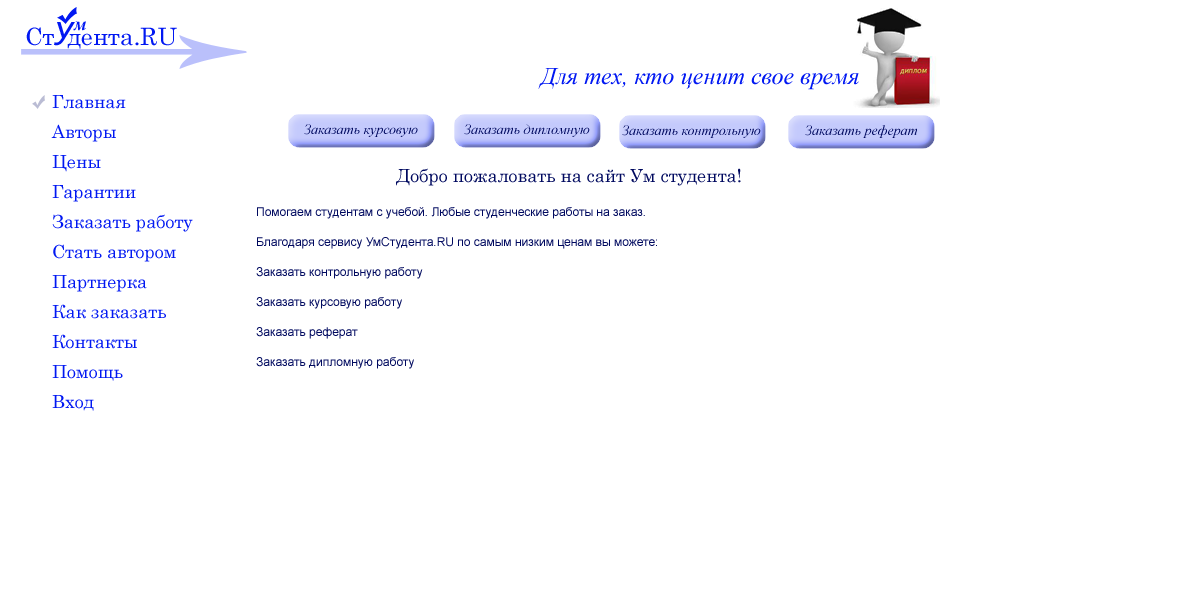
<style>
.page{position:relative;width:1200px;height:600px;background:#ffffff}
.page>*{position:absolute;margin:0}
.t1{font:24px "Century";color:#0118f2}
.t2{font:36px "Consolas-Italic";color:#0118f2}
.t3{font:18px "BookAntiqua-BoldItalic";color:#0118f2}
.t4{font:24px "TimesNewRomanPS-ItalicMT";color:#0118f2}
.t5{font:18px/30px "Century";color:#0118f2}
.t6{font:14px "TimesNewRomanPS-ItalicMT";color:#00095f}
.t7{font:18px "Century";color:#00095f}
.t8{font:12px/30px "ArialMT";color:#00095f}
</style>
<div class="page">
<p class="t1" style="left:26px;top:27px;width:151px;height:22px">Ст  дента.RU</p>
<p class="t2" style="left:54px;top:22px;width:21px;height:24px">У</p>
<p class="t3" style="left:73px;top:21px;width:13px;height:10px">м</p>
<p class="t4" style="left:538px;top:68px;width:321px;height:22px">Для тех, кто ценит свое время</p>
<p class="t5" style="left:51px;top:95px;width:142px;height:316px">Главная<br>Авторы<br>Цены<br>Гарантии<br>Заказать работу<br>Стать автором<br>Партнерка<br>Как заказать<br>Контакты<br>Помощь<br>Вход</p>
<p class="t6" style="left:304px;top:124px;width:114px;height:13px">Заказать курсовую</p>
<p class="t6" style="left:464px;top:124px;width:126px;height:13px">Заказать дипломную</p>
<p class="t6" style="left:622px;top:125px;width:139px;height:13px">Заказать контрольную</p>
<p class="t6" style="left:805px;top:125px;width:112px;height:13px">Заказать реферат</p>
<p class="t7" style="left:396px;top:168px;width:345px;height:18px">Добро пожаловать на сайт Ум студента!</p>
<p class="t8" style="left:256px;top:207px;width:401px;height:162px">Помогаем студентам с учебой. Любые студенческие работы на заказ. <br>Благодаря сервису УмСтудента.RU по самым низким ценам вы можете: <br>Заказать контрольную работу<br>Заказать курсовую работу<br>Заказать реферат<br>Заказать дипломную работу</p>
</div>
